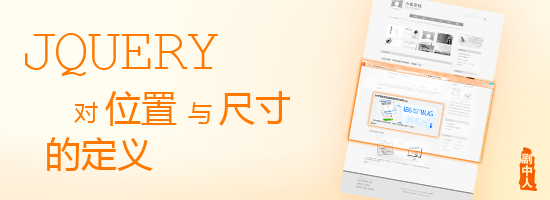
<style>
.page{position:relative;width:550px;height:200px}
.page>*{position:absolute;margin:0}
.t1{font:60px "CourierNewPSMT";letter-spacing:-0.05em;color:#ff7800;text-transform:uppercase}
.t2{font:36px "MicrosoftYaHei";color:#ff7800}
.t3{font:24px "MicrosoftYaHei";color:#ff7800}
</style>
<div class="page">
<p class="t1" style="left:25px;top:33px;width:193px;height:43px">jquery</p>
<p class="t2" style="left:74px;top:91px;width:216px;height:35px"><span class="t3">对 </span>位置 <span class="t3">与 </span>尺寸</p>
<p class="t2" style="left:47px;top:137px;width:106px;height:34px">的定义</p>
</div>
